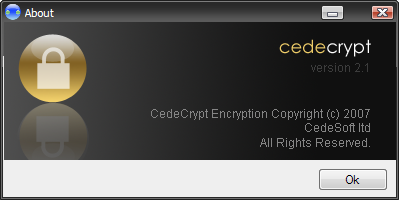
<style>
.page{position:relative;width:399px;height:200px}
.page>*{position:absolute;margin:0}
.t1{font:18px "CenturyGothic";color:#ffffff}
.t2{font:18px "CenturyGothic";color:#edcb68}
.t3{font:12px "ArialMT";color:#3c3c3c}
.t4{font:12px "ArialMT";color:#858585}
</style>
<div class="page">
<p class="t1" style="left:279px;top:39px;width:92px;height:18px"><span class="t2">cede</span>crypt</p>
<p class="t3" style="left:311px;top:63px;width:57px;height:9px">version 2.1</p>
<p class="t4" style="left:151px;top:109px;width:219px;height:40px;text-align:right">CedeCrypt Encryption Copyright (c) 2007<br>CedeSoft ltd<br>All Rights Reserved.</p>
</div>
